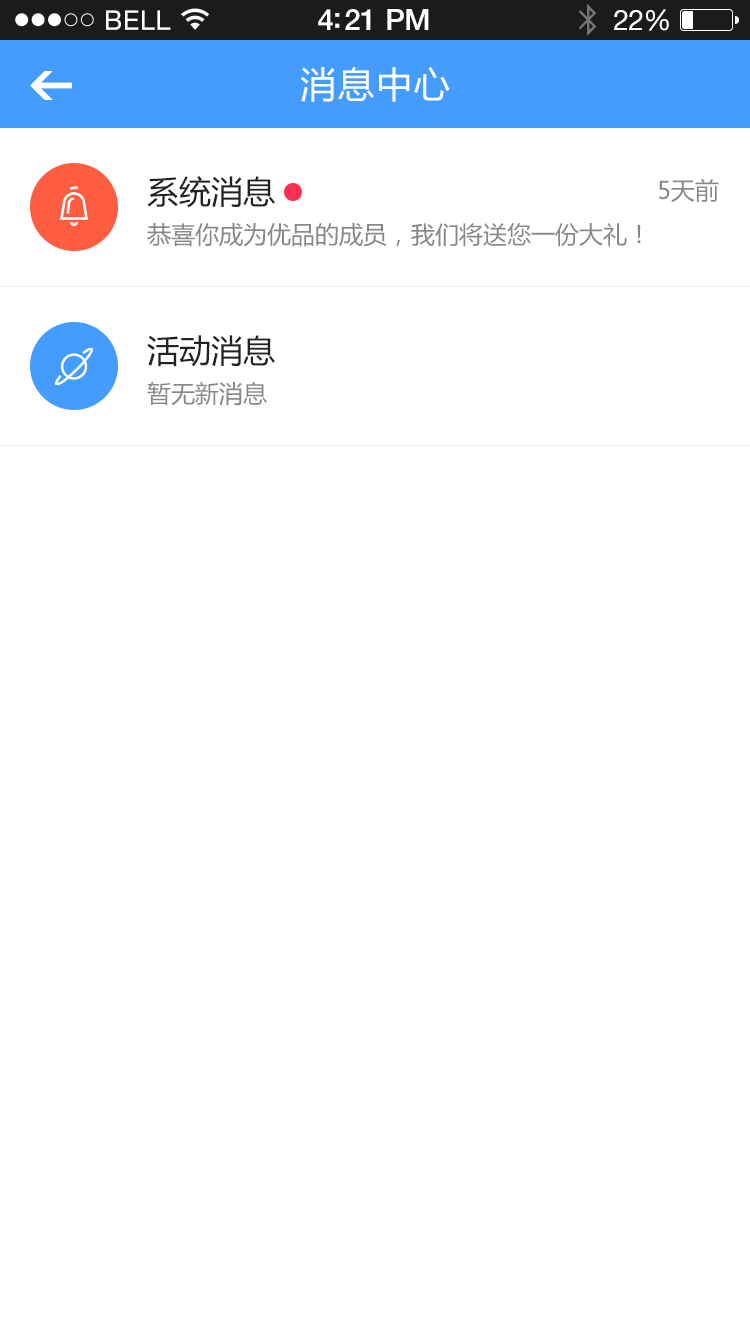
<style>
.page{position:relative;width:750px;height:1334px;background:#ffffff}
.page>*{position:absolute;margin:0}
.t1{font:36px "MicrosoftYaHei";letter-spacing:0.05em;color:#ffffff}
.t2{font:32px "MicrosoftYaHei";color:#222222}
.t3{font:24px "MicrosoftYaHei";color:#888888}
</style>
<div class="page">
<p class="t1" style="left:301px;top:67px;width:149px;height:35px">消息中心</p>
<p class="t2" style="left:147px;top:176px;width:128px;height:32px">系统消息</p>
<p class="t3" style="left:659px;top:178px;width:60px;height:24px">5天前</p>
<p class="t3" style="left:147px;top:222px;width:494px;height:25px">恭喜你成为优品的成员，我们将送您一份大礼！</p>
<p class="t2" style="left:147px;top:335px;width:128px;height:32px">活动消息</p>
<p class="t3" style="left:147px;top:381px;width:120px;height:25px">暂无新消息</p>
</div>
